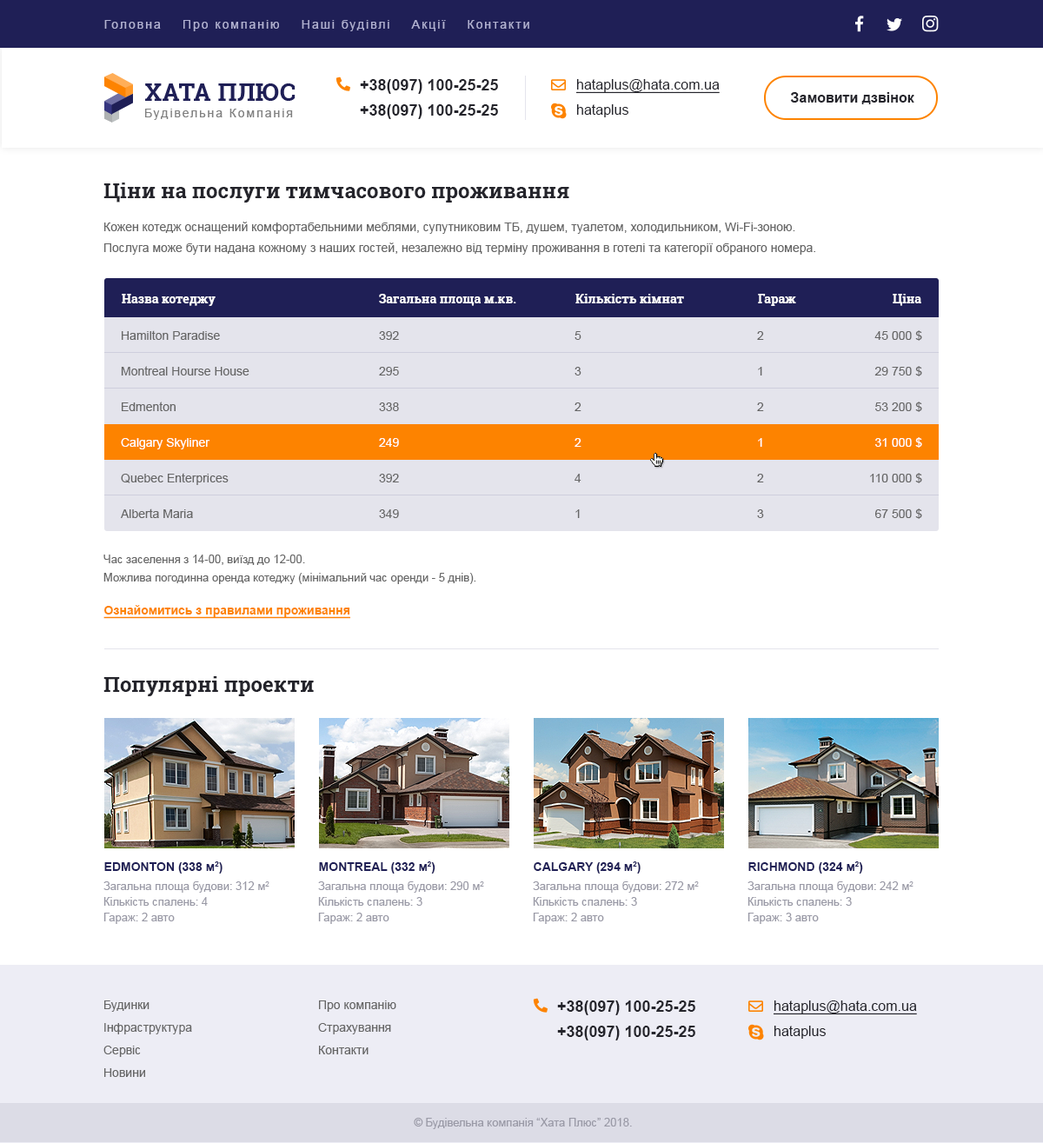
<style>
.page{position:relative;width:1043px;height:1143px;background:#ffffff}
.page>*{position:absolute;margin:0}
.t1{font:12.2px "ArialMT";letter-spacing:0.14em;color:#b1b1d2}
.t2{font:15.6px "Arial-BoldMT";color:#25252c}
.t3{font:13.9px "ArialMT";color:#25252c;text-decoration:underline}
.t4{font:13.9px "Arial-BoldMT";color:#25252c}
.t5{font:13.9px "ArialMT";color:#25252c}
.t6{font:20.9px "RobotoSlab-Bold";color:#24242b}
.t7{font:12.2px/20.9px "ArialMT";color:#666666}
.t8{font:12.2px "RobotoSlab-Bold";color:#ffffff}
.t9{font:12.2px "ArialMT";color:#666666}
.t10{font:12.2px "ArialMT";color:#ffffff}
.t11{font:11.3px/18.3px "ArialMT";color:#666666}
.t12{font:12.2px "Arial-BoldMT";color:#fd8300;text-decoration:underline}
.t13{font:12.2px "Arial-BoldMT";color:#1f1f56}
.t14{font:11.3px/15.6px "ArialMT";color:#9999a6}
.t15{font:12.2px/22.6px "ArialMT";color:#666666}
.t16{font:11.3px "ArialMT";color:#9999a6}
</style>
<div class="page">
<p class="t1" style="left:104px;top:20px;width:425px;height:11px">Головна    Про компанію    Наші будівлі    Акції    Контакти</p>
<p class="t2" style="left:360px;top:79px;width:138px;height:15px">+38(097) 100-25-25</p>
<p class="t3" style="left:576px;top:79px;width:144px;height:15px">hataplus@hata.com.ua</p>
<p class="t4" style="left:790px;top:92px;width:124px;height:12px">Замовити дзвінок</p>
<p class="t2" style="left:360px;top:104px;width:138px;height:15px">+38(097) 100-25-25</p>
<p class="t5" style="left:576px;top:104px;width:52px;height:13px">hataplus</p>
<p class="t6" style="left:103px;top:183px;width:466px;height:20px">Ціни на послуги тимчасового проживання</p>
<p class="t7" style="left:104px;top:222px;width:711px;height:33px">Кожен котедж оснащений комфортабельними меблями, супутниковим ТБ, душем, туалетом, холодильником, Wi-Fi-зоною. <br>Послуга може бути надана кожному з наших гостей, незалежно від терміну проживання в готелі та категорії обраного номера.</p>
<p class="t8" style="left:122px;top:294px;width:94px;height:12px">Назва котеджу</p>
<p class="t8" style="left:379px;top:294px;width:137px;height:12px">Загальна площа м.кв.</p>
<p class="t8" style="left:575px;top:294px;width:109px;height:9px">Кількість кімнат</p>
<p class="t8" style="left:758px;top:294px;width:38px;height:12px">Гараж</p>
<p class="t8" style="left:893px;top:294px;width:28px;height:12px">Ціна</p>
<p class="t9" style="left:122px;top:330px;width:98px;height:10px">Hamilton Paradise</p>
<p class="t9" style="left:379px;top:331px;width:20px;height:9px">392</p>
<p class="t9" style="left:575px;top:331px;width:7px;height:9px">5</p>
<p class="t9" style="left:757px;top:331px;width:7px;height:9px">2</p>
<p class="t9" style="left:875px;top:330px;width:47px;height:11px">45 000 $</p>
<p class="t9" style="left:121px;top:366px;width:128px;height:10px">Montreal Hourse House</p>
<p class="t9" style="left:875px;top:366px;width:47px;height:10px">29 750 $</p>
<p class="t9" style="left:379px;top:367px;width:20px;height:9px">295</p>
<p class="t9" style="left:575px;top:367px;width:7px;height:9px">3</p>
<p class="t9" style="left:758px;top:367px;width:4px;height:9px">1</p>
<p class="t9" style="left:122px;top:402px;width:54px;height:9px">Edmenton</p>
<p class="t9" style="left:875px;top:402px;width:47px;height:10px">53 200 $</p>
<p class="t9" style="left:379px;top:402px;width:20px;height:9px">338</p>
<p class="t9" style="left:575px;top:402px;width:7px;height:9px">2</p>
<p class="t9" style="left:757px;top:402px;width:7px;height:9px">2</p>
<p class="t10" style="left:875px;top:437px;width:47px;height:11px">31 000 $</p>
<p class="t10" style="left:121px;top:438px;width:89px;height:11px">Calgary Skyliner</p>
<p class="t10" style="left:379px;top:438px;width:20px;height:9px">249</p>
<p class="t10" style="left:575px;top:438px;width:7px;height:9px">2</p>
<p class="t10" style="left:758px;top:438px;width:4px;height:9px">1</p>
<p class="t9" style="left:121px;top:473px;width:108px;height:12px">Quebec Enterprices</p>
<p class="t9" style="left:379px;top:474px;width:20px;height:8px">392</p>
<p class="t9" style="left:575px;top:474px;width:7px;height:8px">4</p>
<p class="t9" style="left:757px;top:474px;width:7px;height:8px">2</p>
<p class="t9" style="left:870px;top:473px;width:52px;height:10px">110 000 $</p>
<p class="t9" style="left:121px;top:509px;width:72px;height:9px">Alberta Maria</p>
<p class="t9" style="left:379px;top:509px;width:20px;height:9px">349</p>
<p class="t9" style="left:575px;top:509px;width:5px;height:9px">1</p>
<p class="t9" style="left:757px;top:509px;width:7px;height:9px">3</p>
<p class="t9" style="left:875px;top:509px;width:47px;height:10px">67 500 $</p>
<p class="t11" style="left:103px;top:555px;width:373px;height:29px">Час заселення з 14-00, виїзд до 12-00.<br>Можлива погодинна оренда котеджу (мінімальний час оренди - 5 днів).</p>
<p class="t12" style="left:103px;top:605px;width:247px;height:14px">Ознайомитись з правилами проживання</p>
<p class="t6" style="left:103px;top:676px;width:211px;height:20px">Популярні проекти</p>
<p class="t13" style="left:104px;top:861px;width:119px;height:13px">EDMONTON (338 м2)</p>
<p class="t13" style="left:319px;top:861px;width:117px;height:13px">MONTREAL (332 м2)</p>
<p class="t13" style="left:534px;top:861px;width:107px;height:13px">CALGARY (294 м2)</p>
<p class="t13" style="left:748px;top:861px;width:115px;height:13px">RICHMOND (324 м2)</p>
<p class="t14" style="left:103px;top:881px;width:166px;height:43px">Загальна площа будови: 312 м2<br>Кількість спалень: 4<br>Гараж: 2 авто</p>
<p class="t14" style="left:318px;top:881px;width:166px;height:43px">Загальна площа будови: 290 м2<br>Кількість спалень: 3<br>Гараж: 2 авто</p>
<p class="t14" style="left:533px;top:881px;width:166px;height:43px">Загальна площа будови: 272 м2<br>Кількість спалень: 3<br>Гараж: 2 авто</p>
<p class="t14" style="left:748px;top:881px;width:166px;height:43px">Загальна площа будови: 242 м2<br>Кількість спалень: 3<br>Гараж: 3 авто</p>
<p class="t15" style="left:103px;top:1001px;width:89px;height:76px">Будинки<br>Інфраструктура<br>Сервіс<br>Новини</p>
<p class="t15" style="left:318px;top:1001px;width:78px;height:53px">Про компанію<br>Страхування<br>Контакти</p>
<p class="t2" style="left:557px;top:1001px;width:138px;height:14px">+38(097) 100-25-25</p>
<p class="t3" style="left:774px;top:1001px;width:143px;height:14px">hataplus@hata.com.ua</p>
<p class="t2" style="left:557px;top:1026px;width:138px;height:15px">+38(097) 100-25-25</p>
<p class="t5" style="left:774px;top:1026px;width:52px;height:13px">hataplus</p>
<p class="t16" style="left:414px;top:1118px;width:218px;height:11px">© Будівельна компанія “Хата Плюс” 2018.</p>
</div>
